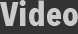
<style>
.page{position:relative;width:78px;height:34px;background:#333333}
.page>*{position:absolute;margin:0}
.t1{font:34.3px "AvenirNextCondensed-Bold";color:#cbcbcb}
</style>
<div class="page">
<p class="t1" style="left:0px;top:0px;width:78px;height:26px">Video</p>
</div>
